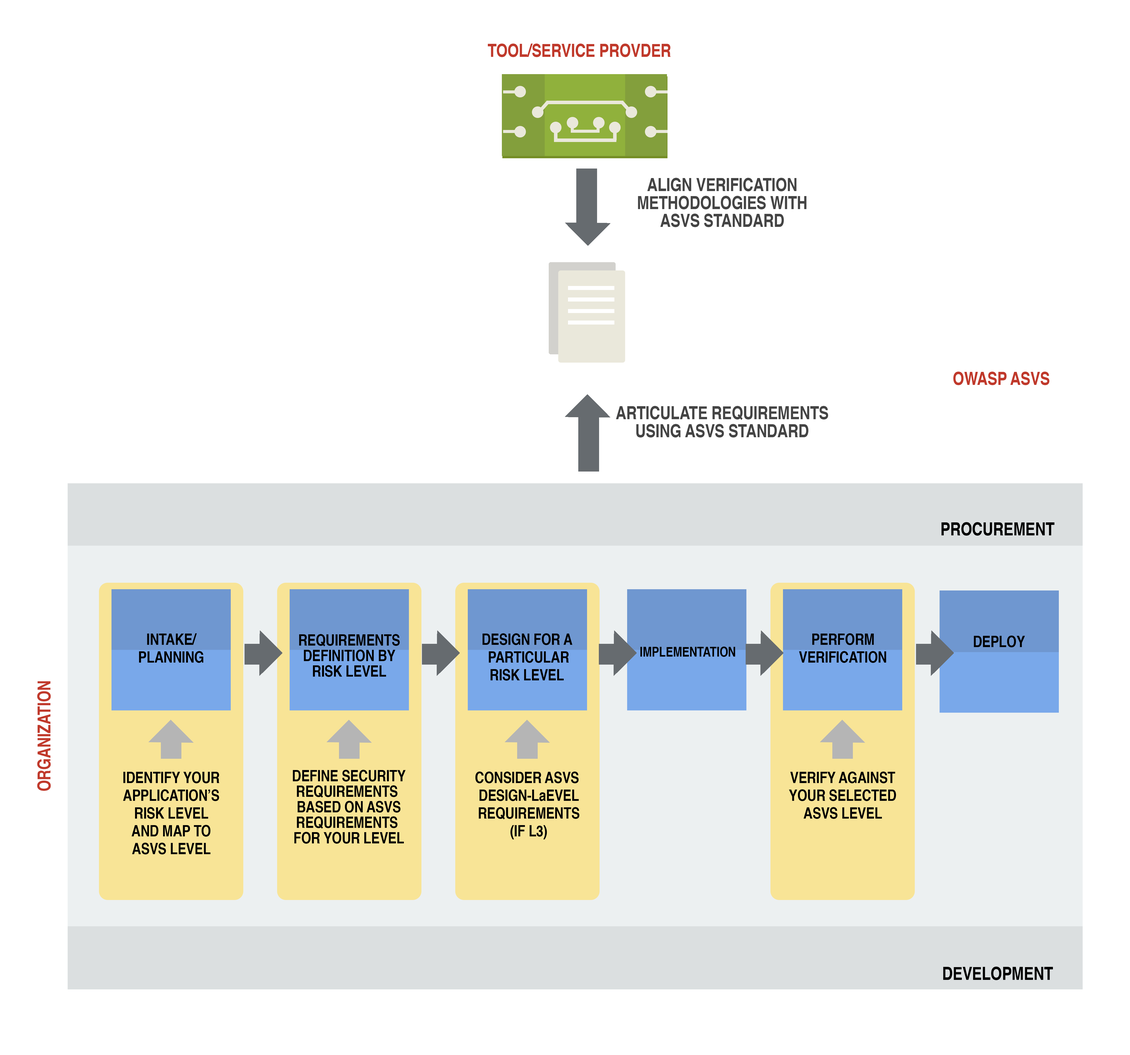
<style>
.page{position:relative;width:1130px;height:1055px;background:#ffffff}
.page>*{position:absolute;margin:0}
.t1{font:17.8px "Helvetica-Bold";letter-spacing:-0.01em;color:#c0392b;scale:0.83 1}
.t2{font:17.8px/17.8px "Helvetica-Bold";letter-spacing:-0.01em;color:#444444;scale:0.83 1}
.t3{font:17.8px "Helvetica-Bold";letter-spacing:-0.01em;color:#000000;scale:0.83 1}
.t4{font:15.5px/17.8px "Helvetica-Bold";letter-spacing:-0.01em;color:#000000;scale:0.83 1}
.t5{font:15.5px/15.5px "Helvetica-Bold";letter-spacing:-0.01em;color:#000000;scale:0.83 1}
.t6{font:15.5px "Helvetica-Bold";letter-spacing:-0.01em;color:#000000;scale:0.83 1}
.t7{font:13.3px "Helvetica-Bold";letter-spacing:-0.01em;color:#000000;scale:0.83 1}
</style>
<div class="page">
<p class="t1" style="left:488px;top:44px;width:183px;height:13px">TOOL/SERVICE PROVDER</p>
<p class="t2" style="left:638px;top:178px;width:168px;height:49px;text-align:center">ALIGN VERIFICATION<br>METHODOLOGIES WITH<br>ASVS STANDARD</p>
<p class="t1" style="left:953px;top:372px;width:96px;height:13px">OWASP ASVS</p>
<p class="t2" style="left:616px;top:406px;width:212px;height:32px;text-align:center">ARTICULATE REQUIREMENTS<br>USING ASVS STANDARD</p>
<p class="t3" style="left:941px;top:522px;width:113px;height:14px">PROCUREMENT</p>
<p class="t4" style="left:139px;top:634px;width:64px;height:29px;text-align:center">INTAKE/<br>PLANNING</p>
<p class="t5" style="left:299px;top:634px;width:101px;height:43px;text-align:center">REQUIREMENTS<br>DEFINITION BY<br>RISK LEVEL</p>
<p class="t4" style="left:482px;top:634px;width:90px;height:47px;text-align:center">DESIGN FOR A <br>PARTICULAR<br>RISK LEVEL</p>
<p class="t4" style="left:799px;top:634px;width:87px;height:29px;text-align:center">PERFORM<br>VERIFICATION</p>
<p class="t6" style="left:973px;top:636px;width:52px;height:12px">DEPLOY</p>
<p class="t7" style="left:640px;top:647px;width:95px;height:10px">IMPLEMENTATION</p>
<p class="t1" style="left:37px;top:681px;width:14px;height:110px;rotate:-90deg">ORGANIZATION</p>
<p class="t4" style="left:123px;top:772px;width:96px;height:83px;text-align:center">IDENTIFY YOUR<br>APPLICATION’S<br>RISK LEVEL<br>AND MAP TO<br>ASVS LEVEL</p>
<p class="t5" style="left:293px;top:770px;width:113px;height:74px;text-align:center">DEFINE SECURITY<br>REQUIREMENTS <br>BASED ON ASVS<br>REQUIREMENTS <br>FOR YOUR LEVEL</p>
<p class="t4" style="left:475px;top:772px;width:104px;height:68px;text-align:center">CONSIDER ASVS <br>DESIGN-LaEVEL<br>REQUIREMENTS<br>(IF L3)</p>
<p class="t4" style="left:789px;top:772px;width:107px;height:47px;text-align:center">VERIFY AGAINST<br>YOUR SELECTED<br>ASVS LEVEL</p>
<p class="t3" style="left:943px;top:967px;width:110px;height:14px">DEVELOPMENT</p>
</div>
